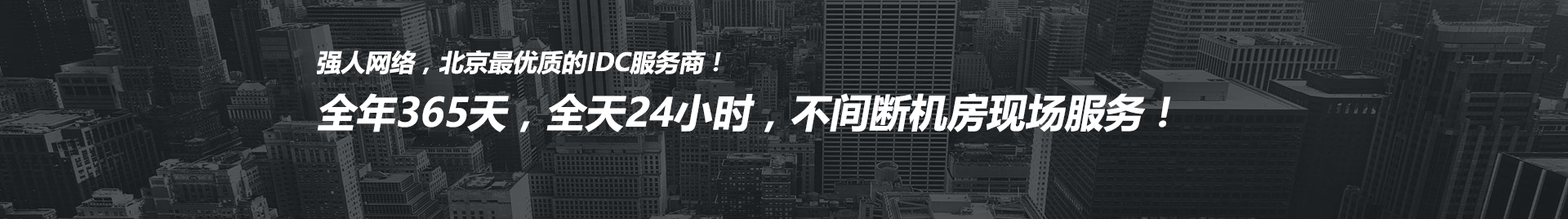
<style>
.page{position:relative;width:1568px;height:219px}
.page>*{position:absolute;margin:0}
.t1{font:39.2px "MicrosoftYaHei-Bold";color:#ffffff;font-style:italic}
.t2{font:24.5px "MicrosoftYaHei-Bold";color:#ffffff;font-style:italic}
</style>
<div class="page">
<p class="t1" style="left:316px;top:50px;width:855px;height:82px"><span class="t2">强人网络，北京最优质的IDC服务商！<br></span>全年365天，全天24小时，不间断机房现场服务！</p>
</div>
